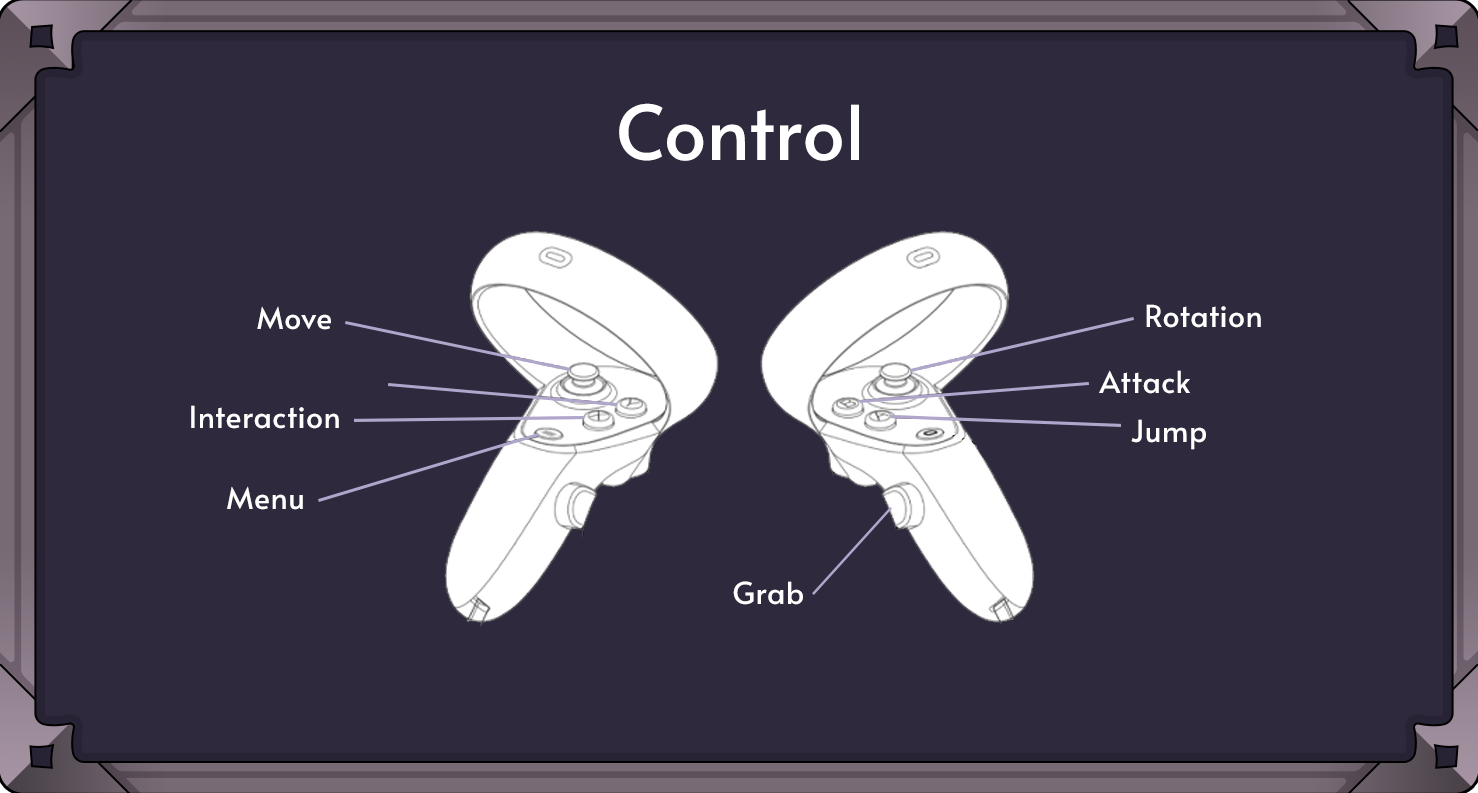
<style>
.page{position:relative;width:1478px;height:793px;background:#2e293c}
.page>*{position:absolute;margin:0}
.t1{font:75.3px "Alata-Regular";letter-spacing:0.02em;color:#ffffff}
.t2{font:30px "Alata-Regular";letter-spacing:0.02em;color:#ffffff}
</style>
<div class="page">
<p class="t1" style="left:619px;top:103px;width:240px;height:58px">Control</p>
<p class="t2" style="left:1146px;top:304px;width:115px;height:24px">Rotation</p>
<p class="t2" style="left:257px;top:306px;width:74px;height:24px">Move</p>
<p class="t2" style="left:1099px;top:370px;width:91px;height:24px">Attack</p>
<p class="t2" style="left:191px;top:405px;width:148px;height:24px">Interaction</p>
<p class="t2" style="left:1131px;top:419px;width:75px;height:31px">Jump</p>
<p class="t2" style="left:227px;top:486px;width:76px;height:24px">Menu</p>
<p class="t2" style="left:733px;top:581px;width:70px;height:24px">Grab</p>
</div>
